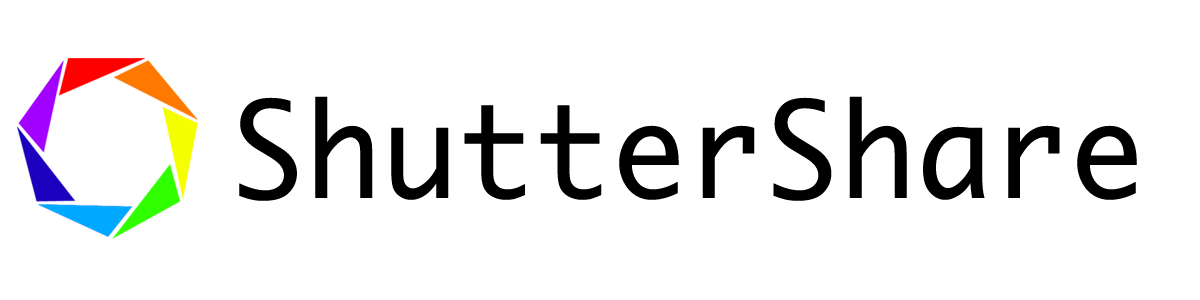
<style>
.page{position:relative;width:1200px;height:300px;background:#ffffff}
.page>*{position:absolute;margin:0}
.t1{font:127.5px "Monaco";letter-spacing:-0.01em;color:#000000;font-weight:bold}
</style>
<div class="page">
<p class="t1" style="left:239px;top:96px;width:898px;height:105px">ShutterShare</p>
</div>
